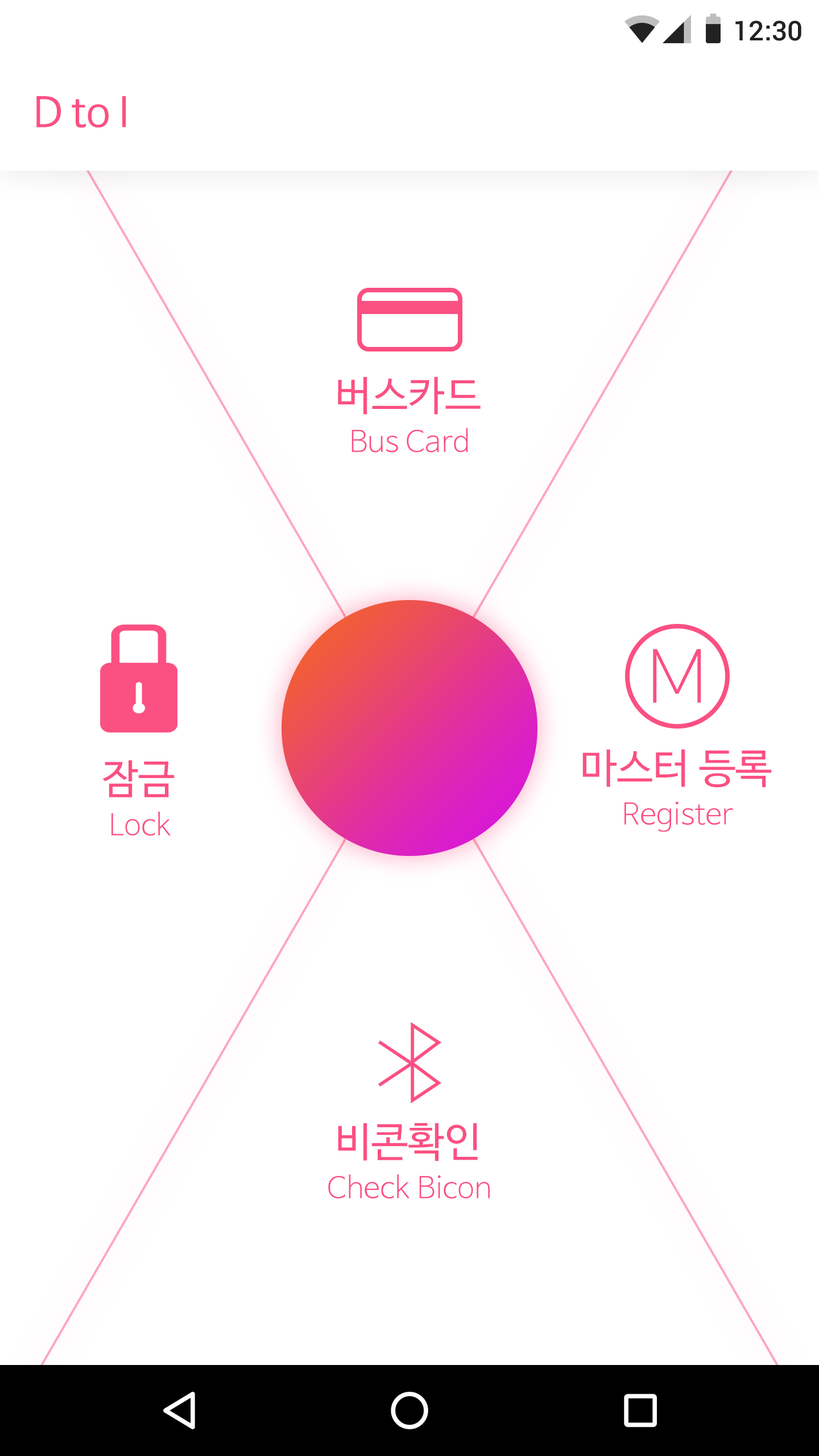
<style>
.page{position:relative;width:819px;height:1456px;background:#ffffff}
.page>*{position:absolute;margin:0}
.t1{font:27.3px "Roboto-Medium";color:#222222}
.t2{font:40.9px "NanumBarunGothic";color:#fb5082}
.t3{font:29.6px "NanumBarunGothicLight";color:#fb5082}
.t4{font:74.2px "NanumSquareOTFL";color:#fb5082}
</style>
<div class="page">
<p class="t1" style="left:735px;top:20px;width:66px;height:21px">12:30</p>
<p class="t2" style="left:36px;top:96px;width:90px;height:32px">D to I</p>
<p class="t2" style="left:338px;top:377px;width:143px;height:38px">버스카드</p>
<p class="t3" style="left:351px;top:428px;width:117px;height:25px">Bus Card</p>
<p class="t4" style="left:653px;top:649px;width:48px;height:54px">M</p>
<p class="t2" style="left:582px;top:749px;width:190px;height:39px">마스터 등록</p>
<p class="t2" style="left:102px;top:760px;width:73px;height:37px">잠금</p>
<p class="t3" style="left:624px;top:801px;width:109px;height:31px">Register</p>
<p class="t3" style="left:111px;top:812px;width:60px;height:24px">Lock</p>
<p class="t2" style="left:338px;top:1123px;width:140px;height:38px">비콘확인</p>
<p class="t3" style="left:328px;top:1174px;width:162px;height:25px">Check Bicon</p>
</div>
